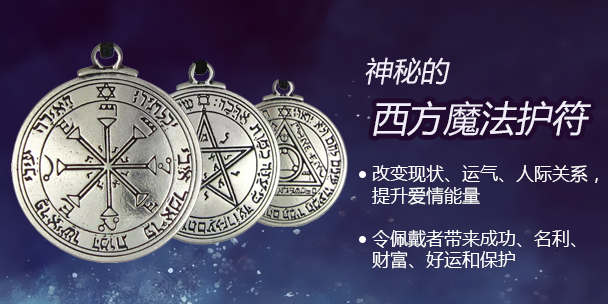
<style>
.page{position:relative;width:608px;height:304px}
.page>*{position:absolute;margin:0}
.t1{font:28px "MicrosoftYaHei";color:#f2eef9;font-style:italic}
.t2{font:36px "MicrosoftYaHei";color:#f2eef9;font-style:italic}
.t3{font:18px "MicrosoftYaHei";color:#ffffff}
</style>
<div class="page">
<p class="t1" style="left:365px;top:57px;width:85px;height:28px">神秘的</p>
<p class="t2" style="left:373px;top:101px;width:218px;height:35px">西方魔法护符</p>
<p class="t3" style="left:372px;top:165px;width:226px;height:104px">改变现状、运气、人际关系，<br>提升爱情能量<br><br>令佩戴者带来成功、名利、<br>财富、好运和保护</p>
</div>
